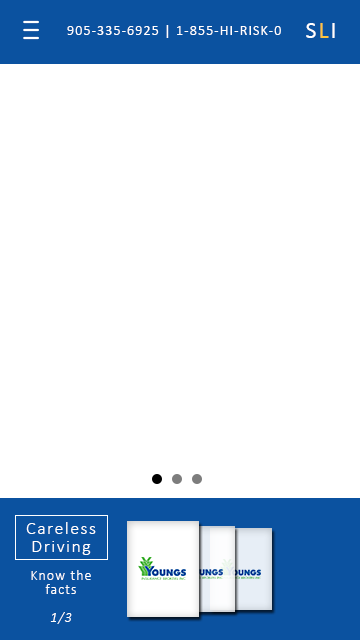
<style>
.page{position:relative;width:360px;height:640px;background:#ffffff}
.page>*{position:absolute;margin:0}
.t1{font:23.9px "Calibri";letter-spacing:0.08em;color:#ffffff}
.t2{font:14px "Calibri";letter-spacing:0.08em;color:#ffffff}
.t3{font:24px "Calibri";letter-spacing:0.08em;color:#ffffff}
.t4{font:24px "Calibri";letter-spacing:0.08em;color:#fdc43e}
.t5{font:18px/18px "Calibri-Light";letter-spacing:0.08em;color:#ffffff}
.t6{font:14px/14px "Calibri-Light";letter-spacing:0.08em;color:#ffffff}
.t7{font:14px/14px "Calibri-LightItalic";letter-spacing:0.08em;color:#ffffff}
</style>
<div class="page">
<p class="t1" style="left:23px;top:20px;width:16px;height:20px;rotate:90deg">III</p>
<p class="t2" style="left:67px;top:25px;width:214px;height:13px">905-335-6925 | 1-855-HI-RISK-0</p>
<p class="t3" style="left:306px;top:23px;width:29px;height:15px">S<span class="t4">L</span>I</p>
<p class="t5" style="left:26px;top:522px;width:70px;height:102px;text-align:center">Careless<br>Driving<br><br><span class="t6">Know the<br>facts<br><br></span><span class="t7">1/3</span></p>
</div>
